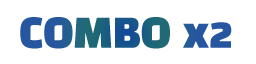
<style>
.page{position:relative;width:256px;height:64px;background:#ffffff}
.page>*{position:absolute;margin:0}
.t1{font:40px "BlackHanSans-Regular";color:#21588f}
</style>
<div class="page">
<p class="t1" style="left:20px;top:17px;width:212px;height:32px">COMBO x2</p>
</div>
